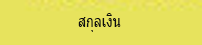
<style>
.page{position:relative;width:202px;height:45px;background:#e7e35d}
.page>*{position:absolute;margin:0}
.t1{font:16px "Tahoma";color:#0e0e10;scale:0.82 1}
</style>
<div class="page">
<p class="t1" style="left:78px;top:13px;width:43px;height:19px">สกุลเงิน</p>
</div>
